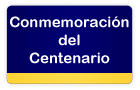
<style>
.page{position:relative;width:140px;height:90px}
.page>*{position:absolute;margin:0}
.t1{font:15px/18px "ArialRoundedMTBold";color:#ffffff}
</style>
<div class="page">
<p class="t1" style="left:10px;top:16px;width:119px;height:48px;text-align:center">Conmemoración<br>del<br>Centenario</p>
</div>
